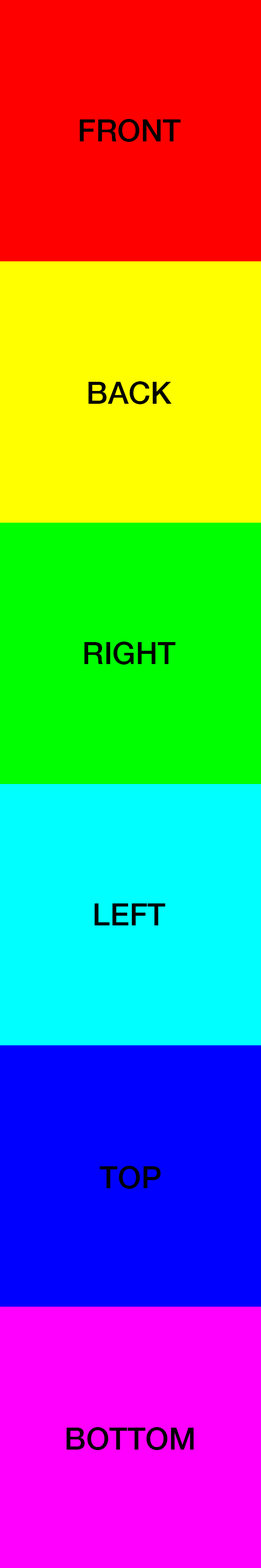
<style>
.page{position:relative;width:261px;height:1568px}
.page>*{position:absolute;margin:0}
.t1{font:30.6px "HelveticaNeue-Medium";color:#000000}
</style>
<div class="page">
<p class="t1" style="left:80px;top:119px;width:101px;height:23px">FRONT</p>
<p class="t1" style="left:88px;top:381px;width:84px;height:23px">BACK</p>
<p class="t1" style="left:84px;top:642px;width:92px;height:23px">RIGHT</p>
<p class="t1" style="left:94px;top:903px;width:72px;height:22px">LEFT</p>
<p class="t1" style="left:100px;top:1166px;width:61px;height:23px">TOP</p>
<p class="t1" style="left:66px;top:1427px;width:128px;height:23px">BOTTOM</p>
</div>
